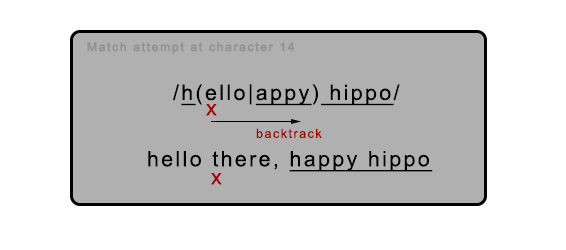
<style>
.page{position:relative;width:566px;height:250px;background:#ffffff}
.page>*{position:absolute;margin:0}
.t1{font:12.1px "ArialMT";letter-spacing:0.113em;color:#929292;font-weight:bold}
.t2{font:21.3px "ArialMT";letter-spacing:0.113em;color:#000000}
.t3{font:21.3px "ArialMT";letter-spacing:0.113em;color:#000000;text-decoration:underline}
.t4{font:21.3px "ArialMT";letter-spacing:0.113em;color:#a10000}
.t5{font:12.7px "ArialMT";letter-spacing:0.113em;color:#a10000}
</style>
<div class="page">
<p class="t1" style="left:87px;top:42px;width:208px;height:12px">Match attempt at character 14</p>
<p class="t2" style="left:173px;top:84px;width:227px;height:22px">/<span class="t3">h</span>(ello|<span class="t3">appy</span>)<span class="t3"> hippo</span>/</p>
<p class="t4" style="left:206px;top:104px;width:11px;height:12px">x</p>
<p class="t5" style="left:256px;top:128px;width:66px;height:11px">backtrack</p>
<p class="t2" style="left:148px;top:151px;width:285px;height:21px">hello there, <span class="t3">happy hippo</span></p>
<p class="t4" style="left:211px;top:173px;width:11px;height:12px">x</p>
</div>
